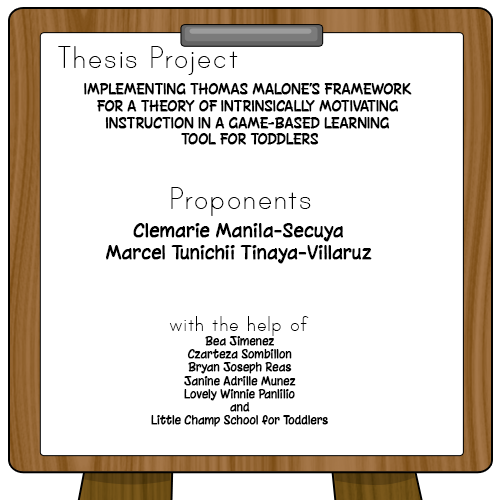
<style>
.page{position:relative;width:500px;height:500px;background:#ffffff}
.page>*{position:absolute;margin:0}
.t1{font:36px "PrintClearly";color:#000000}
.t2{font:14px "Chinacat";color:#000000;font-weight:bold}
.t3{font:18px "Chinacat";color:#000000;font-weight:bold}
.t4{font:24px "PrintClearly";color:#000000}
.t5{font:11px "Chinacat";color:#000000;font-weight:bold}
</style>
<div class="page">
<p class="t1" style="left:58px;top:46px;width:180px;height:29px">Thesis Project</p>
<p class="t2" style="left:84px;top:83px;width:328px;height:62px;text-align:center">IMPLEMENTING THOMAS MALONE’S FRAMEWORK <br>FOR A THEORY OF INTRINSICALLY MOTIVATING <br>INSTRUCTION IN A GAME-BASED LEARNING <br>TOOL FOR TODDLERS</p>
<p class="t1" style="left:171px;top:187px;width:140px;height:29px">Proponents</p>
<p class="t3" style="left:106px;top:223px;width:266px;height:41px;text-align:center">Clemarie Manila-Secuya<br>Marcel Tunichii Tinaya-Villaruz</p>
<p class="t4" style="left:169px;top:316px;width:140px;height:20px">with the help of</p>
<p class="t5" style="left:151px;top:336px;width:177px;height:91px;text-align:center">Bea Jimenez<br>Czarteza Sombillon<br>Bryan Joseph Reas<br>Janine Adrille Munez<br>Lovely Winnie Panlilio<br>and<br>Little Champ School for Toddlers</p>
</div>
